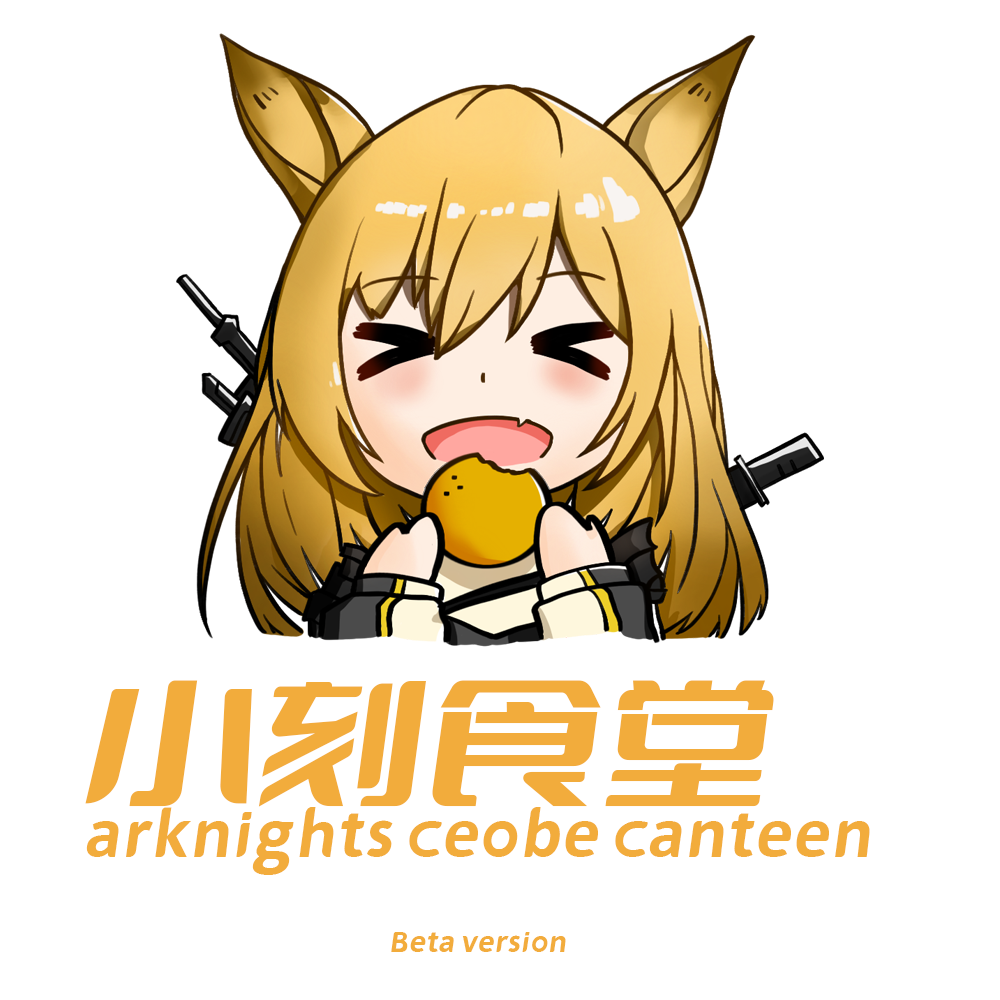
<style>
.page{position:relative;width:1000px;height:1000px;background:#ffffff}
.page>*{position:absolute;margin:0}
.t1{font:133.3px "DOUYUFont";color:#f2ac3c}
.t2{font:53.3px "DOUYUFont";color:#f2ac3c}
.t3{font:24px "DOUYUFont";color:#f2ac3c}
</style>
<div class="page">
<p class="t1" style="left:85px;top:680px;width:689px;height:127px">小刻食堂</p>
<p class="t2" style="left:86px;top:807px;width:784px;height:68px">arknights ceobe canteen</p>
<p class="t3" style="left:391px;top:932px;width:175px;height:20px">Beta version</p>
</div>
